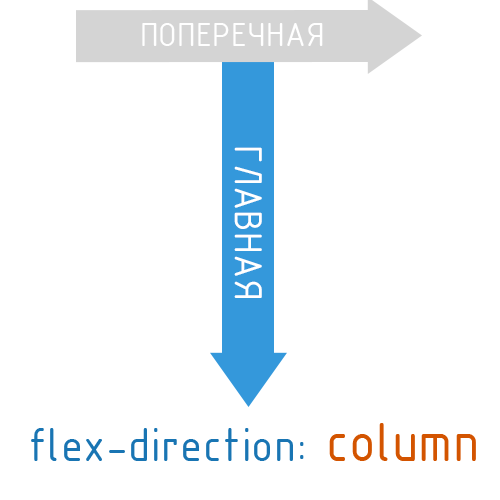
<style>
.page{position:relative;width:500px;height:500px;background:#ffffff}
.page>*{position:absolute;margin:0}
.t1{font:36.1px "ISOCPEUR";letter-spacing:0.006em;color:#ffffff}
.t2{font:42px "ISOCPEUR";letter-spacing:0.006em;color:#ffffff}
.t3{font:49.8px "ISOCPEUR";letter-spacing:0.006em;color:#1975b3}
.t4{font:59.2px "ISOCPEUR";letter-spacing:0.006em;color:#d35400}
</style>
<div class="page">
<p class="t1" style="left:142px;top:23px;width:181px;height:23px">ПОПЕРЕЧНАЯ</p>
<p class="t2" style="left:234px;top:147px;width:28px;height:151px;rotate:90deg">ГЛАВНАЯ</p>
<p class="t3" style="left:31px;top:423px;width:445px;height:38px">flex-direction: <span class="t4">column</span></p>
</div>
